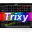
<style>
.page{position:relative;width:32px;height:32px}
.page>*{position:absolute;margin:0}
.t1{font:10px "Arial-BoldItalicMT"}
</style>
<div class="page">
<p class="t1" style="left:5px;top:13px;width:24px;height:9px">Trixy</p>
</div>
